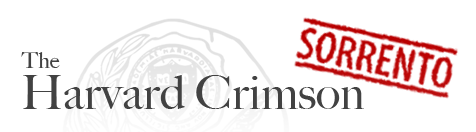
<style>
.page{position:relative;width:476px;height:132px;background:#ffffff}
.page>*{position:absolute;margin:0}
.t1{font:22.1px "BigCaslon-Medium";color:#424242}
.t2{font:47.1px "BigCaslon-Medium";color:#424242}
</style>
<div class="page">
<p class="t1" style="left:21px;top:52px;width:39px;height:16px">The</p>
<p class="t2" style="left:23px;top:75px;width:341px;height:34px">Harvard Crimson</p>
</div>
